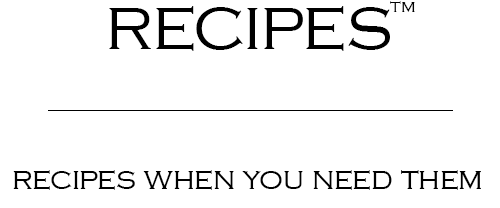
<style>
.page{position:relative;width:500px;height:208px;background:#ffffff}
.page>*{position:absolute;margin:0}
.t1{font:75px "CopperplateGothic-Light";color:#000000}
.t2{font:33.3px "CopperplateGothic-Light";color:#000000}
.t3{font:32px "CopperplateGothic-Light";color:#000000}
</style>
<div class="page">
<p class="t1" style="left:109px;top:6px;width:281px;height:45px">recipes</p>
<p class="t2" style="left:390px;top:1px;width:25px;height:11px">tm</p>
<p class="t3" style="left:13px;top:170px;width:468px;height:20px">recipes when you need them</p>
</div>
